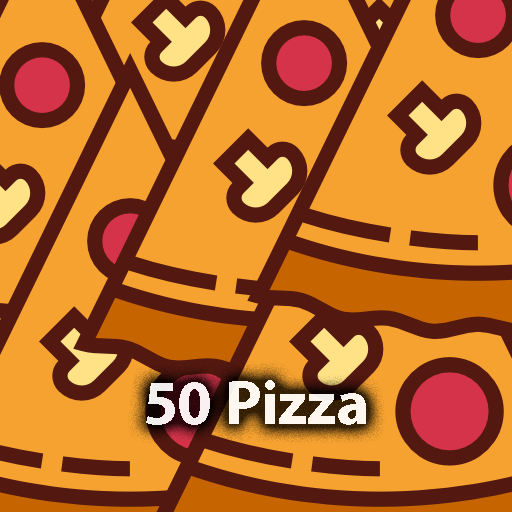
<style>
.page{position:relative;width:512px;height:512px;background:#f6a230}
.page>*{position:absolute;margin:0}
.t1{font:62.5px "MyriadPro-Bold";color:#ffffff}
</style>
<div class="page">
<p class="t1" style="left:146px;top:380px;width:220px;height:45px;opacity:0.9">50 Pizza</p>
</div>
